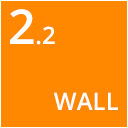
<style>
.page{position:relative;width:128px;height:128px;background:#ff8800}
.page>*{position:absolute;margin:0}
.t1{font:24px "OpenSans-Semibold";color:#ffffff}
.t2{font:48px "OpenSans-Semibold";color:#ffffff}
</style>
<div class="page">
<p class="t1" style="left:10px;top:9px;width:45px;height:36px"><span class="t2">2</span>.2</p>
<p class="t1" style="left:54px;top:92px;width:64px;height:18px">WALL</p>
</div>
